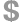
<style>
.page{position:relative;width:22px;height:22px;background:#ffffff}
.page>*{position:absolute;margin:0}
.t1{font:31.9px "CoolveticaRg-Regular";color:#959595;scale:1.05 1}
</style>
<div class="page">
<p class="t1" style="left:3px;top:0px;width:16px;height:22px">$</p>
</div>
